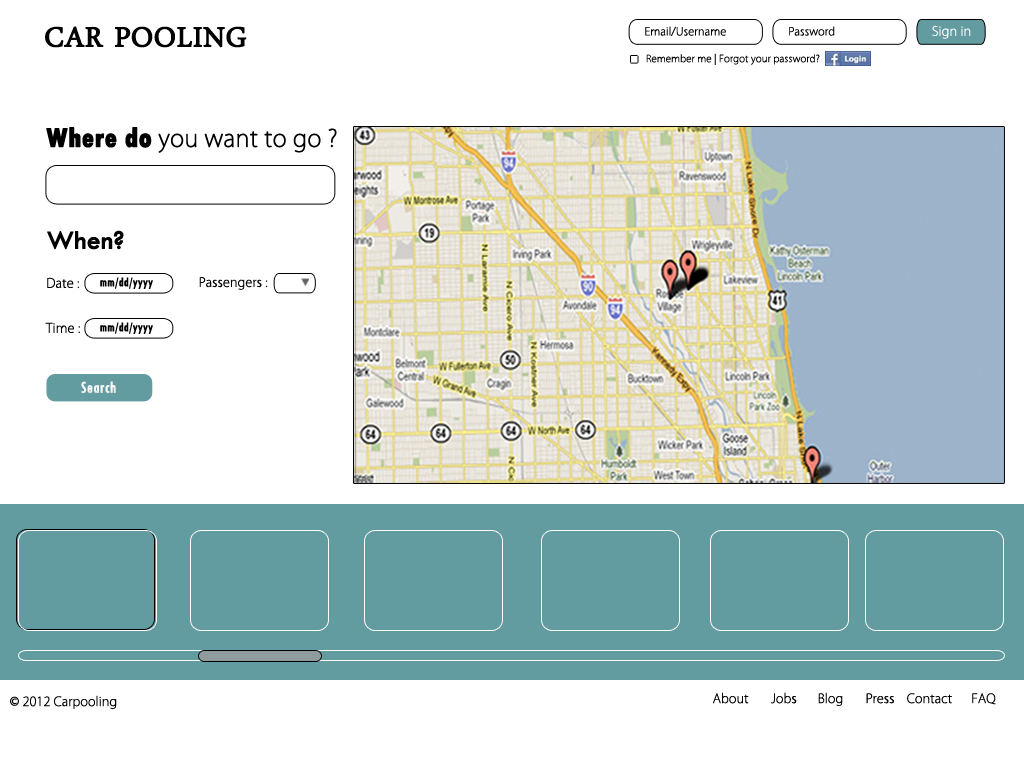
<style>
.page{position:relative;width:1024px;height:768px;background:#ffffff}
.page>*{position:absolute;margin:0}
.t1{font:39.7px "DaunPenh";color:#000000;font-weight:bold}
.t2{font:10.7px "KozGoPr6N-ExtraLight";color:#000000;font-weight:bold}
.t3{font:12.5px "KozGoPr6N-ExtraLight";color:#ffffff;font-weight:bold}
.t4{font:9.6px "KozGoPr6N-ExtraLight";color:#000000;font-weight:bold}
.t5{font:23.1px "KozGoPr6N-ExtraLight";color:#000000;font-weight:bold}
.t6{font:27.8px "TwCenMT-CondensedExtraBold";color:#000000;font-weight:bold}
.t7{font:26.9px "TwCenMT-Regular";color:#000000;font-weight:bold}
.t8{font:12.6px "KozGoPr6N-ExtraLight";color:#000000;font-weight:bold}
.t9{font:13px "TwCenMT-Condensed";color:#000000;font-weight:bold}
.t10{font:12.4px "KozGoPr6N-ExtraLight";color:#000000;font-weight:bold}
.t11{font:17px "TwCenMT-Condensed";color:#ffffff;font-weight:bold}
</style>
<div class="page">
<p class="t1" style="left:45px;top:26px;width:202px;height:22px">CAR POOLING</p>
<p class="t2" style="left:645px;top:26px;width:81px;height:10px">Email/Username</p>
<p class="t2" style="left:789px;top:26px;width:46px;height:10px">Password</p>
<p class="t3" style="left:932px;top:25px;width:39px;height:14px">Sign in</p>
<p class="t4" style="left:646px;top:53px;width:174px;height:12px">Remember me | Forgot your password?</p>
<p class="t5" style="left:46px;top:127px;width:291px;height:26px"><span class="t6">Where do </span>you want to go ?</p>
<p class="t7" style="left:47px;top:230px;width:77px;height:20px">When?</p>
<p class="t8" style="left:47px;top:277px;width:32px;height:12px">Date :</p>
<p class="t9" style="left:100px;top:277px;width:53px;height:12px">mm/dd/yyyy</p>
<p class="t10" style="left:199px;top:277px;width:69px;height:13px">Passengers :</p>
<p class="t8" style="left:45px;top:322px;width:35px;height:11px">Time :</p>
<p class="t9" style="left:100px;top:322px;width:53px;height:12px">mm/dd/yyyy</p>
<p class="t11" style="left:81px;top:381px;width:35px;height:13px">Search</p>
<p class="t10" style="left:10px;top:695px;width:107px;height:15px">© 2012 Carpooling</p>
<p class="t10" style="left:713px;top:692px;width:283px;height:15px">About       Jobs      Blog       Press   Contact      FAQ</p>
</div>
